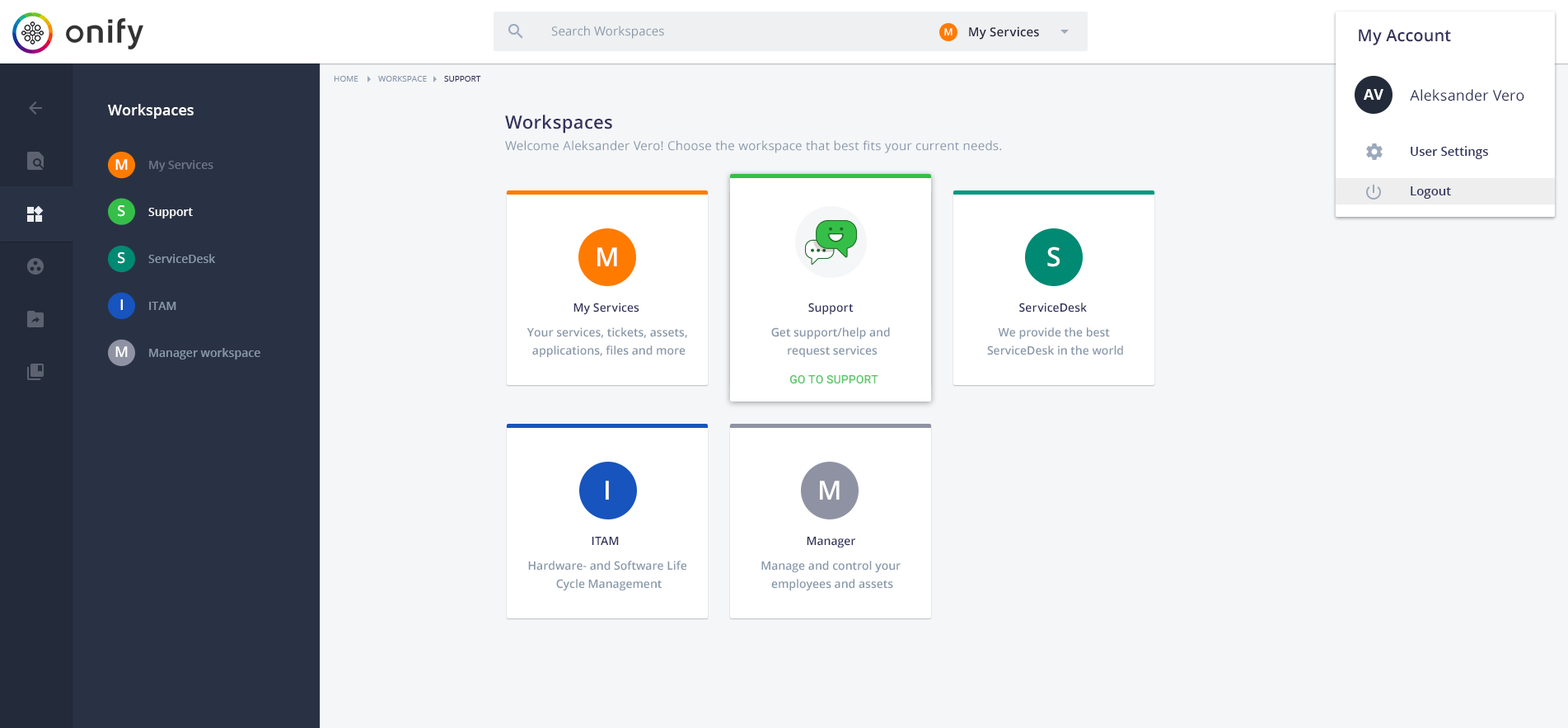
<style>
.page{position:relative;width:1568px;height:728px;background:#f5f6f8}
.page>*{position:absolute;margin:0}
.t1{font:12.4px "OpenSans";letter-spacing:0.01em;color:#8898aa}
.t2{font:9.9px "OpenSans-Semibold";letter-spacing:0.01em;color:#ffffff}
.t3{font:12.4px "OpenSans-Semibold";letter-spacing:0.01em;color:#23233d}
.t4{font:16.5px "OpenSans-Semibold";letter-spacing:0.01em;color:#32325d}
.t5{font:8.2px "OpenSans";color:#8898aa;text-transform:uppercase}
.t6{font:8.2px "OpenSans";color:#32325d;text-transform:uppercase}
.t7{font:14.8px "OpenSans-Bold";color:#ffffff;text-transform:uppercase}
.t8{font:14.8px "OpenSans";letter-spacing:0.01em;color:#32325d}
.t9{font:14.8px "OpenSans-Semibold";color:#ffffff}
.t10{font:18.1px "OpenSans-Semibold";letter-spacing:0.02em;color:#32325d}
.t11{font:12.4px "OpenSans";letter-spacing:0.02em;color:#8898aa}
.t12{font:12.4px "OpenSans-Semibold";color:#32325d}
.t13{font:14.8px "OpenSans-Semibold";letter-spacing:0.01em;color:#ffffff}
.t14{font:11.5px "OpenSans-Semibold";color:#6d7484}
.t15{font:11.5px "OpenSans-Semibold";color:#ffffff}
.t16{font:11.5px "OpenSans-Semibold";color:#8898aa}
.t17{font:26.4px "OpenSans-Semibold";letter-spacing:0.005em;color:#ffffff}
.t18{font:11.5px "OpenSans-Semibold";letter-spacing:0.005em;color:#32325d}
.t19{font:11.5px/18.1px "OpenSans-Semibold";color:#8898aa}
.t20{font:11.5px "Roboto-Medium";letter-spacing:0.005em;color:#5dc86a;text-transform:uppercase}
</style>
<div class="page">
<p class="t1" style="left:551px;top:26px;width:113px;height:13px">Search Workspaces</p>
<p class="t2" style="left:944px;top:28px;width:9px;height:7px">M</p>
<p class="t3" style="left:969px;top:26px;width:70px;height:14px">My Services</p>
<p class="t4" style="left:1359px;top:29px;width:92px;height:16px">My Account</p>
<p class="t5" style="left:334px;top:76px;width:24px;height:6px">Home</p>
<p class="t5" style="left:378px;top:76px;width:49px;height:6px">Workspace</p>
<p class="t6" style="left:444px;top:76px;width:37px;height:6px">Support</p>
<p class="t7" style="left:1364px;top:89px;width:19px;height:11px">AV</p>
<p class="t8" style="left:1410px;top:89px;width:114px;height:12px">Aleksander Vero</p>
<p class="t9" style="left:108px;top:104px;width:86px;height:15px">Workspaces</p>
<p class="t10" style="left:505px;top:115px;width:107px;height:18px">Workspaces</p>
<p class="t11" style="left:505px;top:140px;width:497px;height:13px">Welcome Aleksander Vero! Choose the workspace that best fits your current needs.</p>
<p class="t12" style="left:1411px;top:146px;width:77px;height:13px">User Settings</p>
<p class="t13" style="left:115px;top:159px;width:13px;height:11px">M</p>
<p class="t14" style="left:149px;top:160px;width:64px;height:11px">My Services</p>
<p class="t12" style="left:1411px;top:186px;width:40px;height:13px">Logout</p>
<p class="t13" style="left:118px;top:205px;width:7px;height:12px">S</p>
<p class="t15" style="left:148px;top:208px;width:45px;height:10px">Support</p>
<p class="t13" style="left:118px;top:252px;width:7px;height:12px">S</p>
<p class="t16" style="left:148px;top:254px;width:68px;height:9px">ServiceDesk</p>
<p class="t17" style="left:597px;top:247px;width:20px;height:19px">M</p>
<p class="t17" style="left:1047px;top:246px;width:13px;height:21px">S</p>
<p class="t13" style="left:120px;top:299px;width:3px;height:11px">I</p>
<p class="t16" style="left:149px;top:302px;width:27px;height:8px">ITAM</p>
<p class="t18" style="left:573px;top:302px;width:66px;height:13px">My Services</p>
<p class="t18" style="left:808px;top:302px;width:46px;height:13px">Support</p>
<p class="t18" style="left:808px;top:302px;width:46px;height:13px">Support</p>
<p class="t18" style="left:1019px;top:302px;width:68px;height:10px">ServiceDesk</p>
<p class="t19" style="left:527px;top:327px;width:160px;height:31px;text-align:center">Your services, tickets, assets, <br>applications, files and more</p>
<p class="t19" style="left:771px;top:327px;width:119px;height:31px;text-align:center">Get support/help and <br>request services</p>
<p class="t19" style="left:771px;top:327px;width:119px;height:31px;text-align:center">Get support/help and <br>request services</p>
<p class="t19" style="left:987px;top:327px;width:136px;height:28px;text-align:center">We provide the best <br>ServiceDesk in the world</p>
<p class="t13" style="left:115px;top:346px;width:13px;height:11px">M</p>
<p class="t16" style="left:149px;top:348px;width:111px;height:11px">Manager workspace</p>
<p class="t20" style="left:790px;top:375px;width:88px;height:9px">Go to support</p>
<p class="t17" style="left:606px;top:480px;width:3px;height:19px">I</p>
<p class="t17" style="left:820px;top:480px;width:20px;height:19px">M</p>
<p class="t18" style="left:592px;top:536px;width:27px;height:9px">ITAM</p>
<p class="t18" style="left:807px;top:536px;width:48px;height:12px">Manager</p>
<p class="t19" style="left:528px;top:560px;width:158px;height:31px;text-align:center">Hardware- and Software Life <br>Cycle Management</p>
<p class="t19" style="left:761px;top:560px;width:140px;height:31px;text-align:center">Manage and control your <br>employees and assets</p>
</div>
